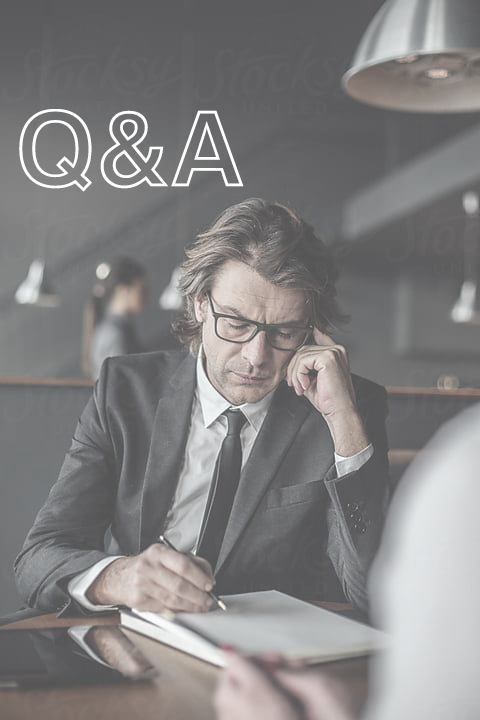
<style>
.page{position:relative;width:480px;height:720px}
.page>*{position:absolute;margin:0}
.t1{font:104.4px "Swiss721BT-BoldOutline";color:#ffffff}
</style>
<div class="page">
<p class="t1" style="left:19px;top:109px;width:225px;height:83px">Q&amp;A</p>
</div>
